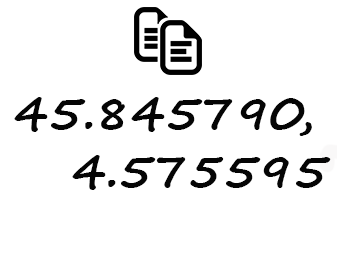
<style>
.page{position:relative;width:337px;height:260px;background:#ffffff}
.page>*{position:absolute;margin:0}
.t1{font:48px "SegoeScript-Bold";color:#050505}
</style>
<div class="page">
<p class="t1" style="left:14px;top:97px;width:317px;height:93px">45.845790, <br>   4.575595</p>
</div>
